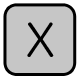
<style>
.page{position:relative;width:80px;height:80px;background:#c6c6c6}
.page>*{position:absolute;margin:0}
.t1{font:48px "NanumSquareRoundR";color:#000000}
</style>
<div class="page">
<p class="t1" style="left:27px;top:22px;width:27px;height:35px">X</p>
</div>
